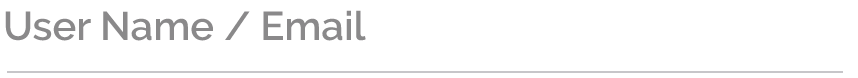
<style>
.page{position:relative;width:858px;height:78px;background:#ffffff}
.page>*{position:absolute;margin:0}
.t1{font:40px "Raleway-SemiBold";color:#8a898a}
</style>
<div class="page">
<p class="t1" style="left:5px;top:10px;width:361px;height:31px">User Name / Email</p>
</div>
